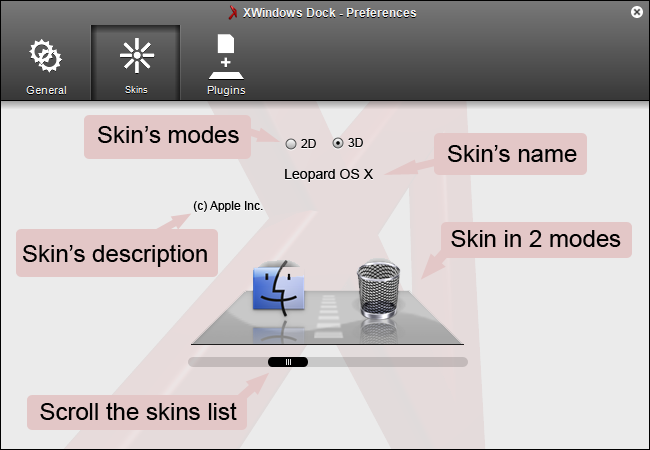
<style>
.page{position:relative;width:650px;height:450px;background:#ebebeb}
.page>*{position:absolute;margin:0}
.t1{font:24px "ArialMT";color:#000000}
.t2{font:12px "ArialMT";color:#000000}
.t3{font:12px "ArialMT"}
.t4{font:14px "ArialMT"}
.t5{font:14px "ArialMT";color:#000000}
</style>
<div class="page">
<p class="t1" style="left:98px;top:126px;width:141px;height:17px">Skin’s modes</p>
<p class="t2" style="left:301px;top:139px;width:15px;height:9px">2D</p>
<p class="t2" style="left:348px;top:138px;width:15px;height:9px">3D</p>
<p class="t1" style="left:448px;top:145px;width:129px;height:17px">Skin’s name</p>
<p class="t3" style="left:193px;top:170px;width:180px;height:43px;text-align:center"><span class="t4">Leopard OS X<br><br></span>(c) Apple Inc.</p>
<p class="t2" style="left:193px;top:169px;width:180px;height:43px;text-align:center"><span class="t5">Leopard OS X<br><br></span>(c) Apple Inc.</p>
<p class="t1" style="left:451px;top:230px;width:170px;height:17px">Skin in 2 modes</p>
<p class="t1" style="left:23px;top:244px;width:184px;height:23px">Skin’s description</p>
<p class="t1" style="left:40px;top:402px;width:197px;height:18px">Scroll the skins list</p>
</div>
